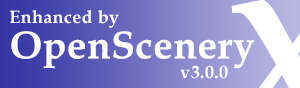
<style>
.page{position:relative;width:300px;height:88px}
.page>*{position:absolute;margin:0}
.t1{font:18.1px "BookAntiqua-Bold";letter-spacing:0.02em;color:#ffffff}
.t2{font:38.8px "BookAntiqua-Bold";letter-spacing:0.02em;color:#ffffff}
</style>
<div class="page">
<p class="t1" style="left:10px;top:10px;width:109px;height:18px">Enhanced by</p>
<p class="t2" style="left:11px;top:31px;width:244px;height:38px">OpenScenery</p>
<p class="t1" style="left:180px;top:65px;width:48px;height:14px">v3.0.0</p>
</div>
